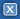
<style>
.page{position:relative;width:20px;height:19px}
.page>*{position:absolute;margin:0}
.t1{font:16px "Candara";letter-spacing:0.01em;color:#ffffff}
</style>
<div class="page">
<p class="t1" style="left:6px;top:6px;width:8px;height:7px">x</p>
</div>
